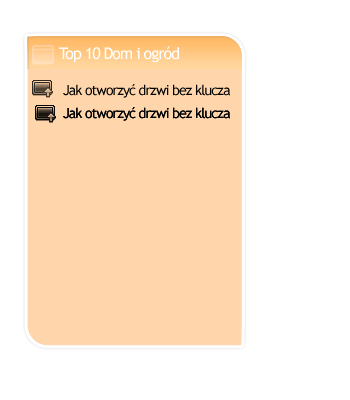
<style>
.page{position:relative;width:350px;height:400px;background:#ffffff}
.page>*{position:absolute;margin:0}
.t1{font:16px "TrebuchetMS";letter-spacing:-0.06em;color:#ffffff}
.t2{font:14px "TrebuchetMS";letter-spacing:-0.06em;color:#000000}
</style>
<div class="page">
<p class="t1" style="left:59px;top:46px;width:120px;height:17px">Top 10 Dom i ogród</p>
<p class="t2" style="left:63px;top:84px;width:167px;height:14px">Jak otworzyć drzwi bez klucza</p>
<p class="t2" style="left:63px;top:107px;width:167px;height:14px">Jak otworzyć drzwi bez klucza</p>
<p class="t2" style="left:63px;top:107px;width:167px;height:14px">Jak otworzyć drzwi bez klucza</p>
</div>
